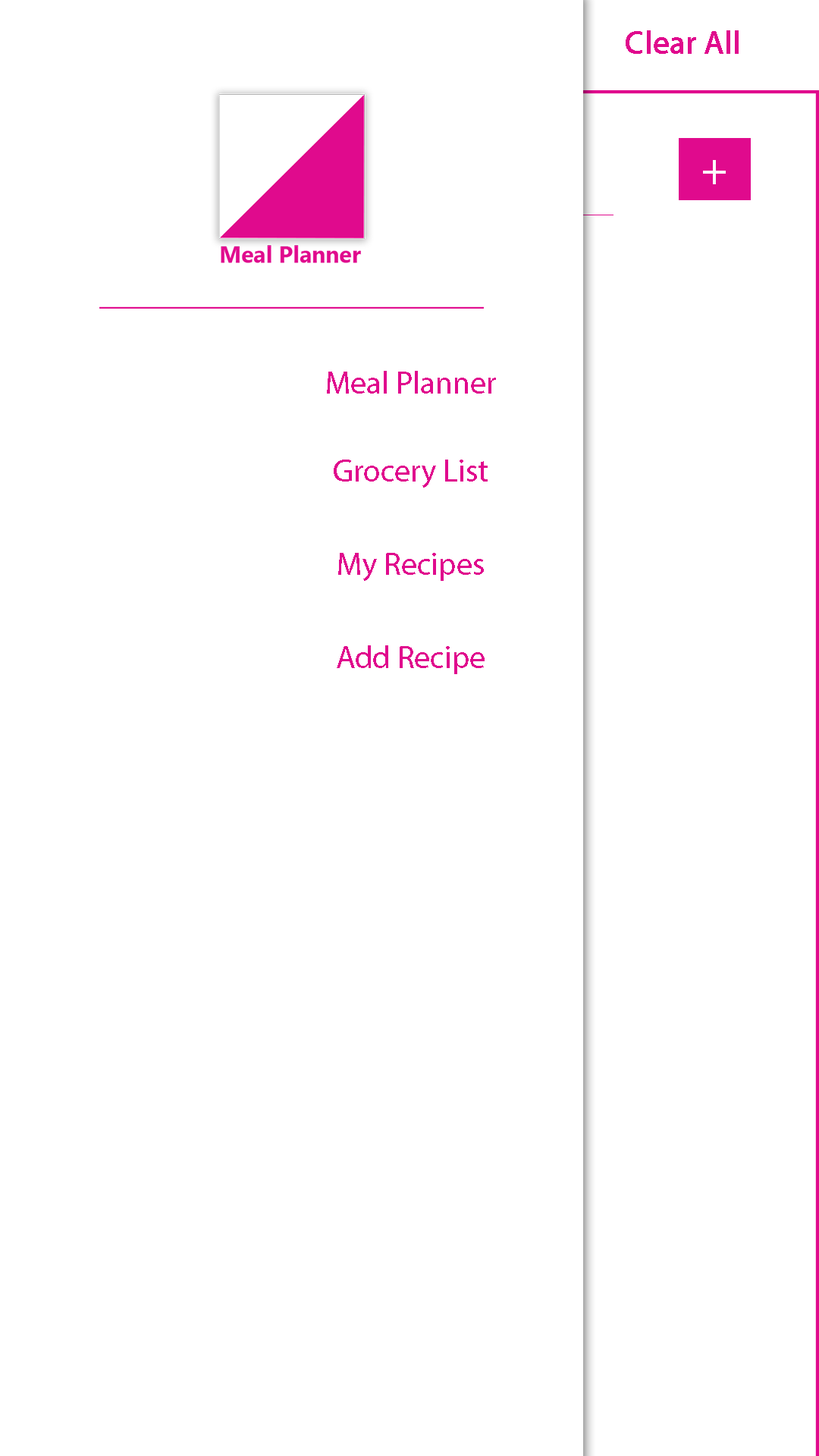
<style>
.page{position:relative;width:819px;height:1456px;background:#ffffff}
.page>*{position:absolute;margin:0}
.t1{font:31.6px "MyriadPro-Regular";color:#e00a8d;font-weight:bold}
.t2{font:44.2px "MyriadPro-Regular";color:#fcfafa}
.t3{font:31.6px "MyriadPro-Regular";color:#e00a8d}
</style>
<div class="page">
<p class="t1" style="left:626px;top:30px;width:113px;height:24px">Clear All</p>
<p class="t2" style="left:703px;top:160px;width:23px;height:24px">+</p>
<p class="t3" style="left:327px;top:371px;width:169px;height:23px">Meal Planner</p>
<p class="t3" style="left:334px;top:460px;width:154px;height:28px">Grocery List</p>
<p class="t3" style="left:338px;top:553px;width:146px;height:28px">My Recipes</p>
<p class="t3" style="left:337px;top:645px;width:148px;height:29px">Add Recipe</p>
</div>
